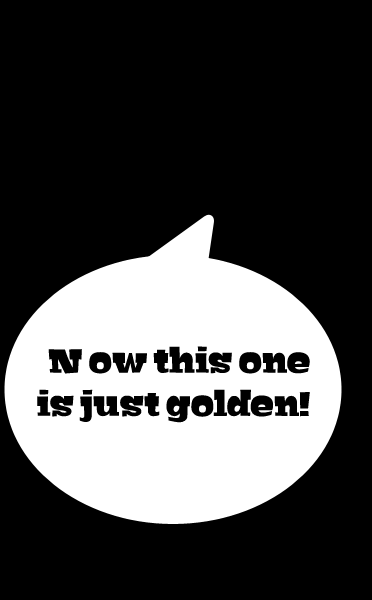
<style>
.page{position:relative;width:372px;height:600px;background:#000000}
.page>*{position:absolute;margin:0}
.t1{font:36px "Bigfish-Black";color:#000000}
</style>
<div class="page">
<p class="t1" style="left:37px;top:346px;width:273px;height:77px">N ow this one<br>  is just golden!</p>
</div>
